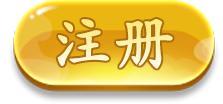
<style>
.page{position:relative;width:223px;height:104px}
.page>*{position:absolute;margin:0}
.t1{font:60px "AaBoruokaishuBldjf";letter-spacing:0.02em}
</style>
<div class="page">
<p class="t1" style="left:57px;top:18px;width:116px;height:51px">注册</p>
</div>
